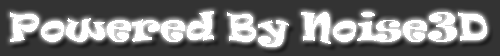
<style>
.page{position:relative;width:500px;height:56px;background:#333333}
.page>*{position:absolute;margin:0}
.t1{font:36px "Ravie";color:#ffffff}
</style>
<div class="page">
<p class="t1" style="left:10px;top:11px;width:477px;height:36px">Powered By Noise3D</p>
</div>
